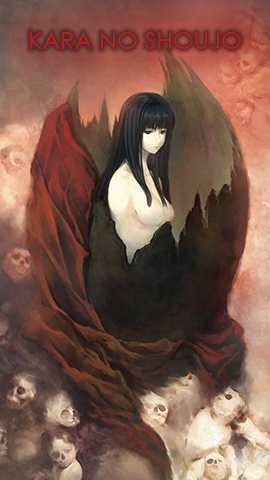
<style>
.page{position:relative;width:270px;height:480px}
.page>*{position:absolute;margin:0}
.t1{font:24px "CenturyGothic";color:#c51a1a}
</style>
<div class="page">
<p class="t1" style="left:30px;top:32px;width:211px;height:17px">KARA NO SHOUJO</p>
</div>
